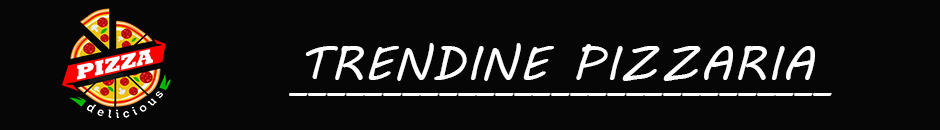
<style>
.page{position:relative;width:940px;height:130px;background:#060606}
.page>*{position:absolute;margin:0}
.t1{font:46.2px "MVBoli";letter-spacing:0.02em;color:#ffffff}
.t2{font:37.5px "MVBoli";letter-spacing:0.02em;color:#ffffff}
</style>
<div class="page">
<p class="t1" style="left:305px;top:43px;width:510px;height:38px">TRENDINE PIZZARIA</p>
<p class="t2" style="left:289px;top:93px;width:543px;height:3px">_____________________________</p>
</div>
